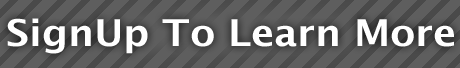
<style>
.page{position:relative;width:460px;height:68px;background:#5e5e5e}
.page>*{position:absolute;margin:0}
.t1{font:36.9px "LucidaSans-Demi";color:#ffffff;scale:1.07 1}
</style>
<div class="page">
<p class="t1" style="left:7px;top:18px;width:447px;height:36px">SignUp To Learn More</p>
</div>
